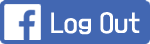
<style>
.page{position:relative;width:150px;height:44px;background:#4267b2}
.page>*{position:absolute;margin:0}
.t1{font:21.9px "KoreanYNMYT-L";color:#ffffff}
</style>
<div class="page">
<p class="t1" style="left:51px;top:12px;width:89px;height:23px">Log Out</p>
</div>
